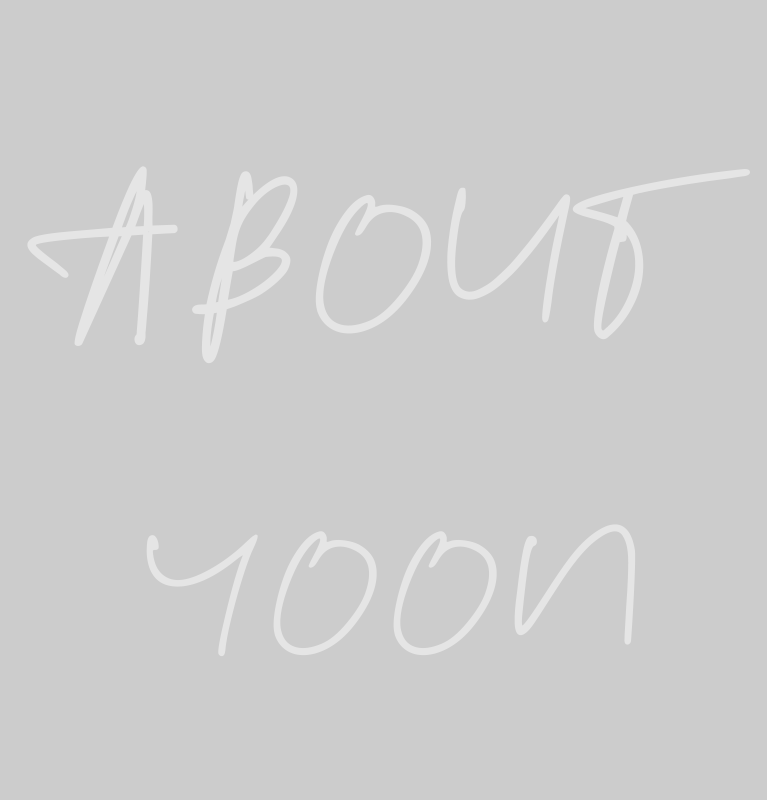
<style>
.page{position:relative;width:767px;height:800px;background:#cccccc}
.page>*{position:absolute;margin:0}
.t1{font:188.6px "Peacelove";color:#e5e5e5;text-transform:uppercase}
.t2{font:168.9px "Peacelove";color:#e5e5e5;text-transform:uppercase}
</style>
<div class="page">
<p class="t1" style="left:27px;top:166px;width:723px;height:198px">ABout</p>
<p class="t2" style="left:146px;top:524px;width:490px;height:133px">Yoon</p>
</div>
